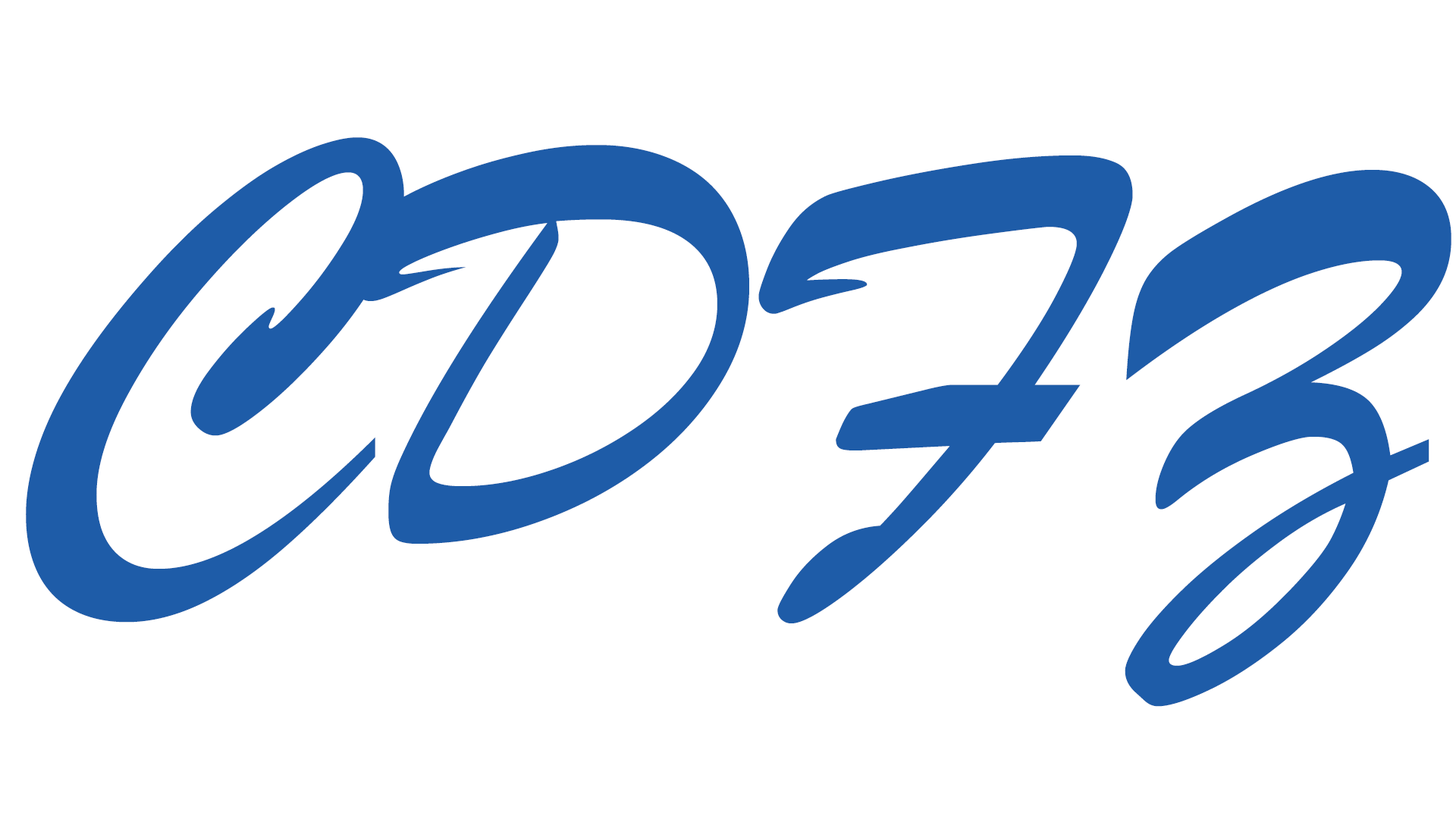
<style>
.page{position:relative;width:1456px;height:819px;background:#ffffff}
.page>*{position:absolute;margin:0}
.t1{font:603.9px "BrushScriptMT";color:#1e5ca8}
</style>
<div class="page">
<p class="t1" style="left:26px;top:137px;width:1425px;height:570px">CDFZ</p>
</div>
